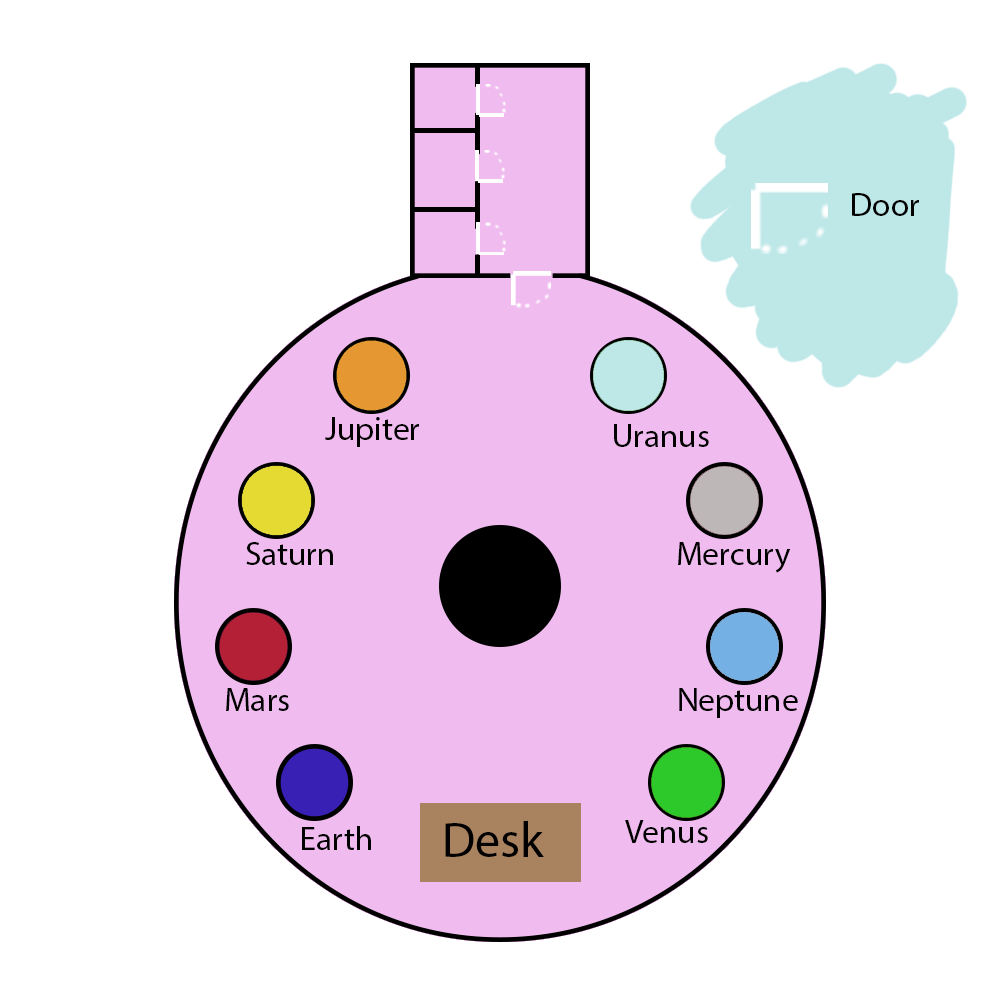
<style>
.page{position:relative;width:1000px;height:1000px;background:#ffffff}
.page>*{position:absolute;margin:0}
.t1{font:33.3px "MyriadPro-Regular";color:#000000}
.t2{font:50px "MyriadPro-Regular";color:#000000}
</style>
<div class="page">
<p class="t1" style="left:852px;top:193px;width:67px;height:23px">Door</p>
<p class="t1" style="left:325px;top:417px;width:94px;height:30px">Jupiter</p>
<p class="t1" style="left:614px;top:424px;width:95px;height:23px">Uranus</p>
<p class="t1" style="left:246px;top:542px;width:87px;height:23px">Saturn</p>
<p class="t1" style="left:678px;top:542px;width:113px;height:31px">Mercury</p>
<p class="t1" style="left:226px;top:688px;width:63px;height:23px">Mars</p>
<p class="t1" style="left:679px;top:688px;width:119px;height:30px">Neptune</p>
<p class="t2" style="left:445px;top:821px;width:99px;height:36px">Desk</p>
<p class="t1" style="left:625px;top:820px;width:83px;height:23px">Venus</p>
<p class="t1" style="left:302px;top:826px;width:69px;height:24px">Earth</p>
</div>
